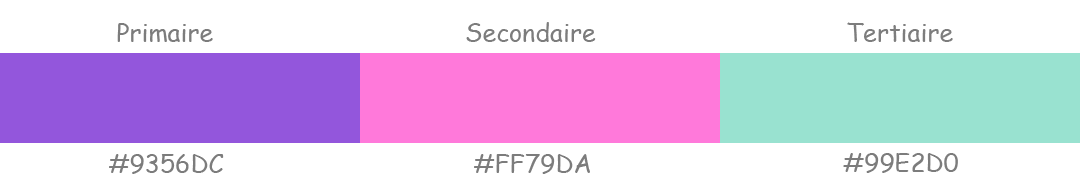
<style>
.page{position:relative;width:1080px;height:194px;background:#ffffff}
.page>*{position:absolute;margin:0}
.t1{font:25px "ComicSansMS";color:#7c7c7c}
.t2{font:25px "ComicSansMS";color:#7d7d7d}
</style>
<div class="page">
<p class="t1" style="left:117px;top:23px;width:96px;height:19px">Primaire</p>
<p class="t1" style="left:466px;top:22px;width:130px;height:20px">Secondaire</p>
<p class="t2" style="left:847px;top:22px;width:106px;height:20px">Tertiaire</p>
<p class="t1" style="left:109px;top:154px;width:115px;height:20px">#9356DC</p>
<p class="t1" style="left:474px;top:154px;width:116px;height:20px">#FF79DA</p>
<p class="t1" style="left:843px;top:153px;width:115px;height:20px">#99E2D0</p>
</div>
